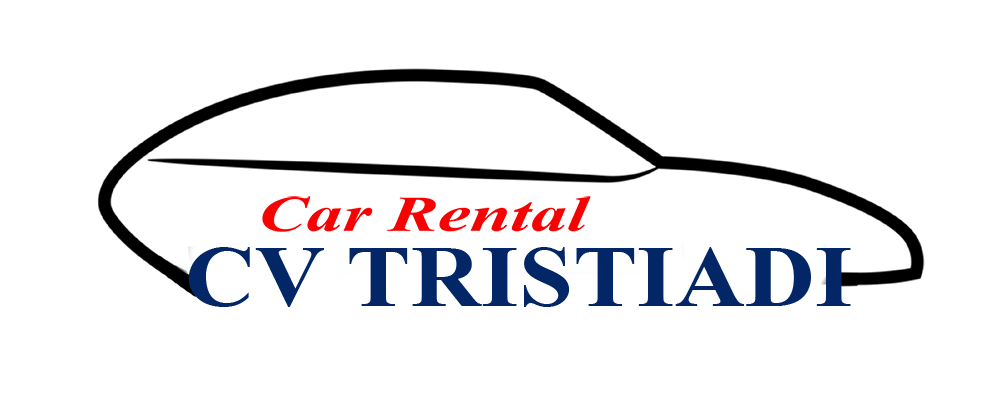
<style>
.page{position:relative;width:1000px;height:402px;background:#ffffff}
.page>*{position:absolute;margin:0}
.t1{font:21px "TimesNewRomanPS-BoldMT";color:#032667;scale:1.11 1}
</style>
<div class="page">
<p class="t1" style="left:188px;top:247px;width:663px;height:60px;text-align:center">CV TRISTIADI</p>
</div>
